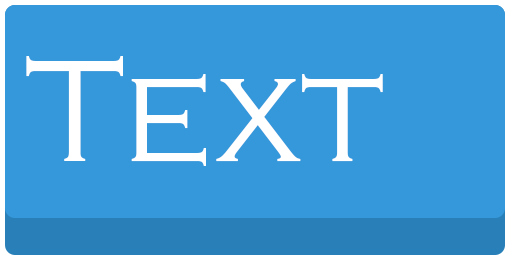
<style>
.page{position:relative;width:510px;height:260px;background:#3498db}
.page>*{position:absolute;margin:0}
.t1{font:150px "CopperplateGothic-Light";color:#ffffff}
</style>
<div class="page">
<p class="t1" style="left:26px;top:56px;width:357px;height:110px">Text</p>
</div>
